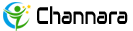
<style>
.page{position:relative;width:133px;height:31px;background:#ffffff}
.page>*{position:absolute;margin:0}
.t1{font:23.8px "Audiowide-Regular";color:#000000;scale:0.73 1}
</style>
<div class="page">
<p class="t1" style="left:37px;top:6px;width:91px;height:18px">Channara</p>
</div>
